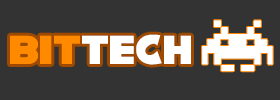
<style>
.page{position:relative;width:280px;height:100px;background:#333333}
.page>*{position:absolute;margin:0}
.t1{font:36px "NiseSegaSonic";color:#ffffff}
.t2{font:36px "NiseSegaSonic";color:#ff8a00}
</style>
<div class="page">
<p class="t1" style="left:10px;top:34px;width:181px;height:31px"><span class="t2">bit</span>Tech</p>
</div>
